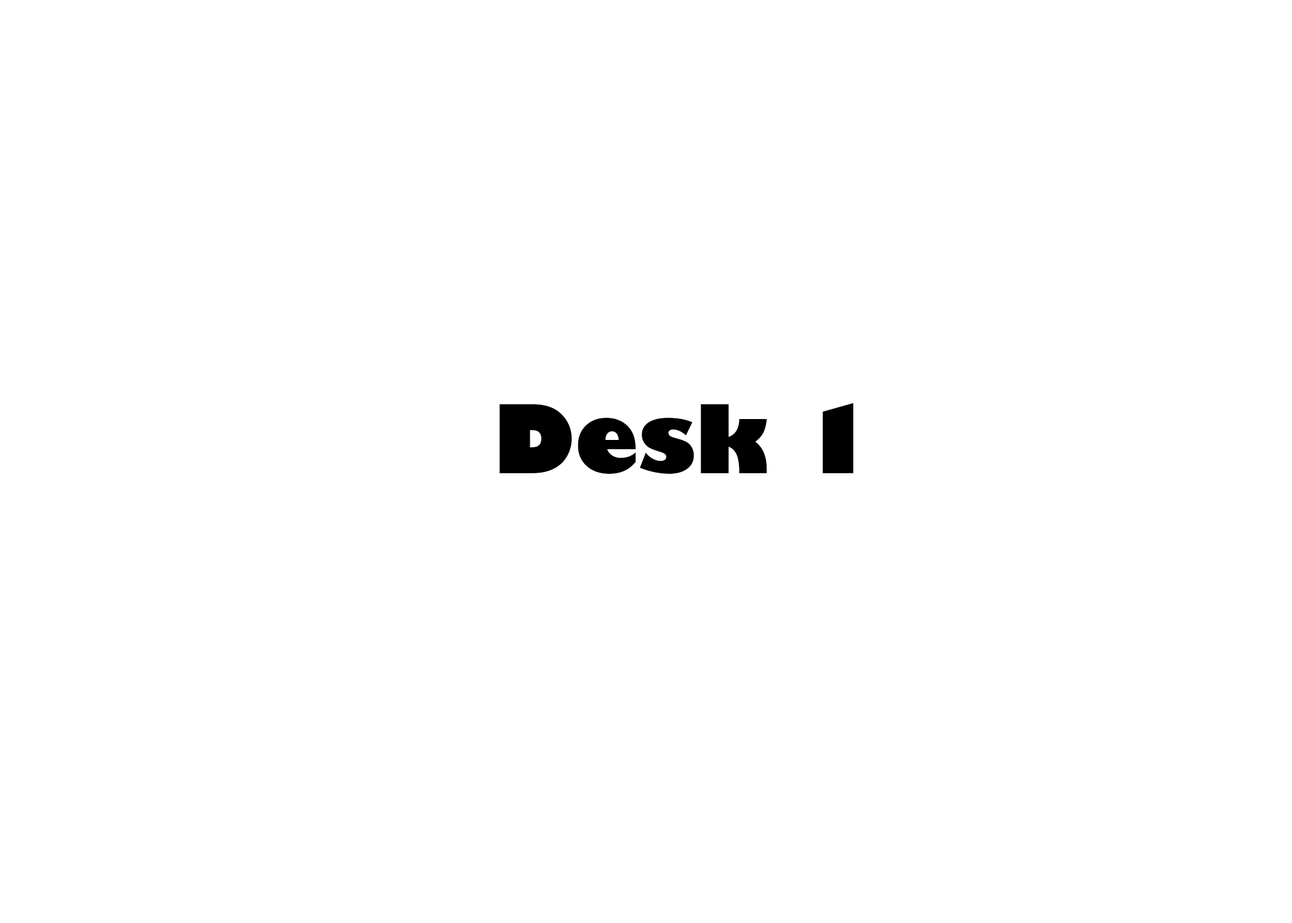
<style>
.page{position:relative;width:1292px;height:923px;background:#ffffff}
.page>*{position:absolute;margin:0}
.t1{font:92.3px "GillSans-UltraBold";color:#000000}
</style>
<div class="page">
<p class="t1" style="left:500px;top:403px;width:353px;height:71px">Desk 1</p>
</div>
